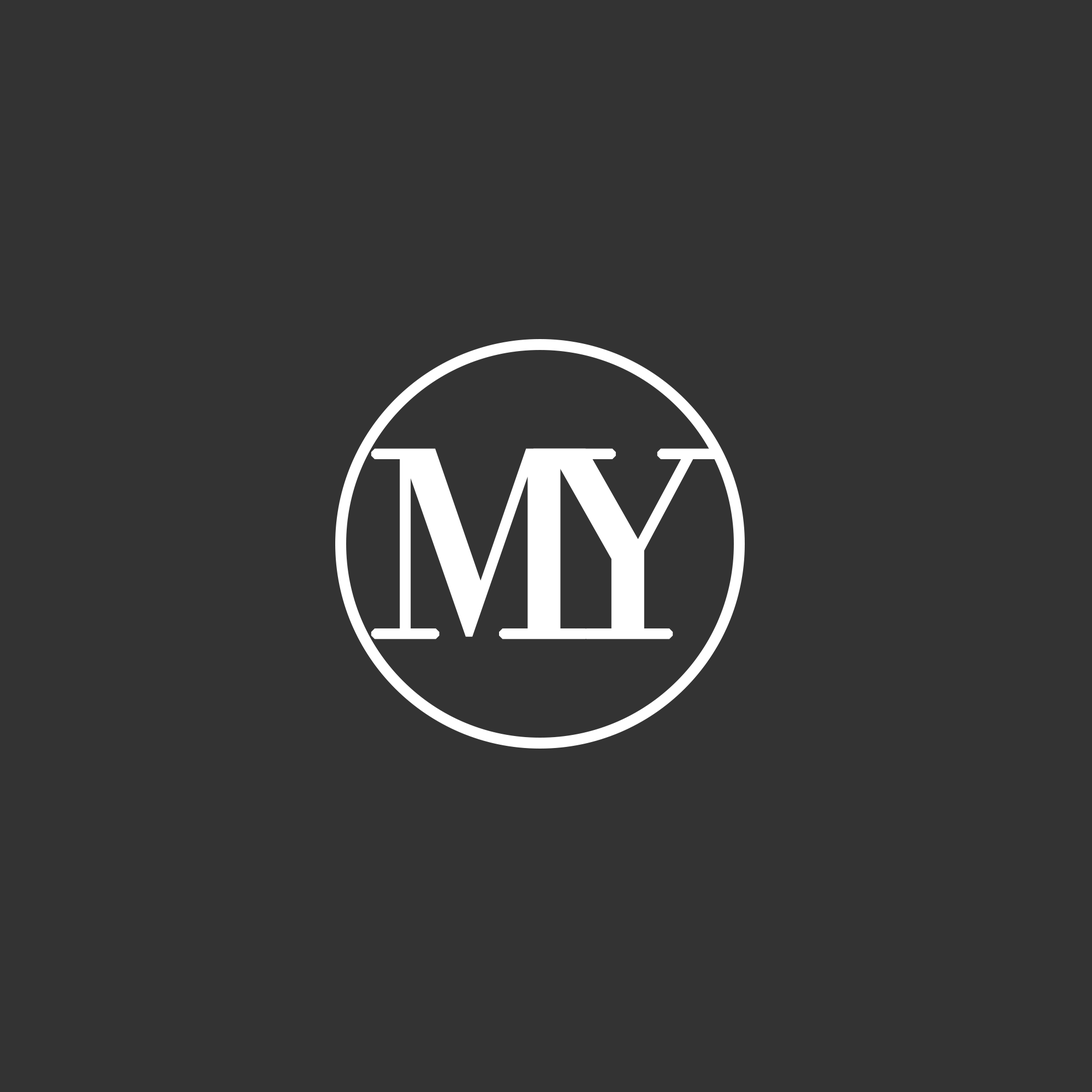
<style>
.page{position:relative;width:1092px;height:1092px;background:#333333}
.page>*{position:absolute;margin:0}
.t1{font:257.7px "Didot";letter-spacing:0.005em;color:#ffffff;font-weight:bold}
</style>
<div class="page">
<p class="t1" style="left:371px;top:448px;width:218px;height:191px">M</p>
<p class="t1" style="left:530px;top:448px;width:190px;height:191px">Y</p>
</div>
